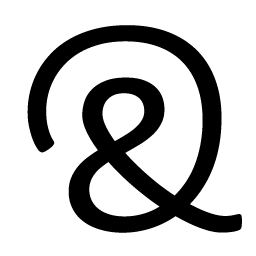
<style>
.page{position:relative;width:256px;height:256px;background:#ffffff}
.page>*{position:absolute;margin:0}
.t1{font:234.7px "Calibri";color:#000000}
</style>
<div class="page">
<p class="t1" style="left:27px;top:25px;width:215px;height:208px">&amp;</p>
</div>
